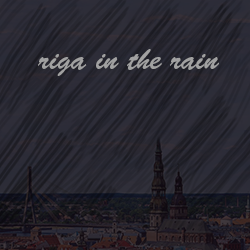
<style>
.page{position:relative;width:250px;height:250px}
.page>*{position:absolute;margin:0}
.t1{font:30px "BrushScriptStd";color:#a1a1a1}
</style>
<div class="page">
<p class="t1" style="left:38px;top:49px;width:181px;height:27px">riga in the rain</p>
</div>
